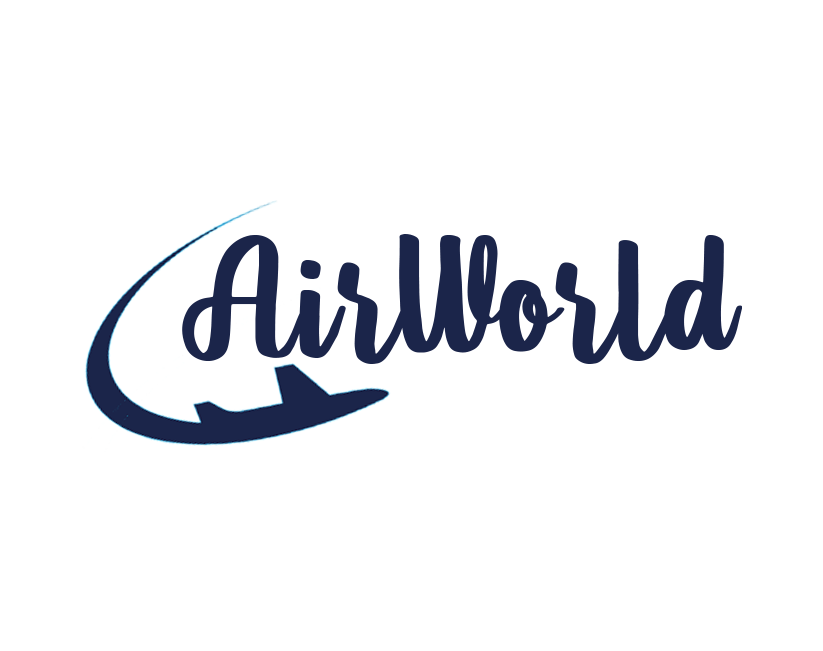
<style>
.page{position:relative;width:823px;height:651px;background:#ffffff}
.page>*{position:absolute;margin:0}
.t1{font:180px "Pintgram-Regular";color:#1b254a}
</style>
<div class="page">
<p class="t1" style="left:182px;top:234px;width:560px;height:130px">AirWorld</p>
</div>
